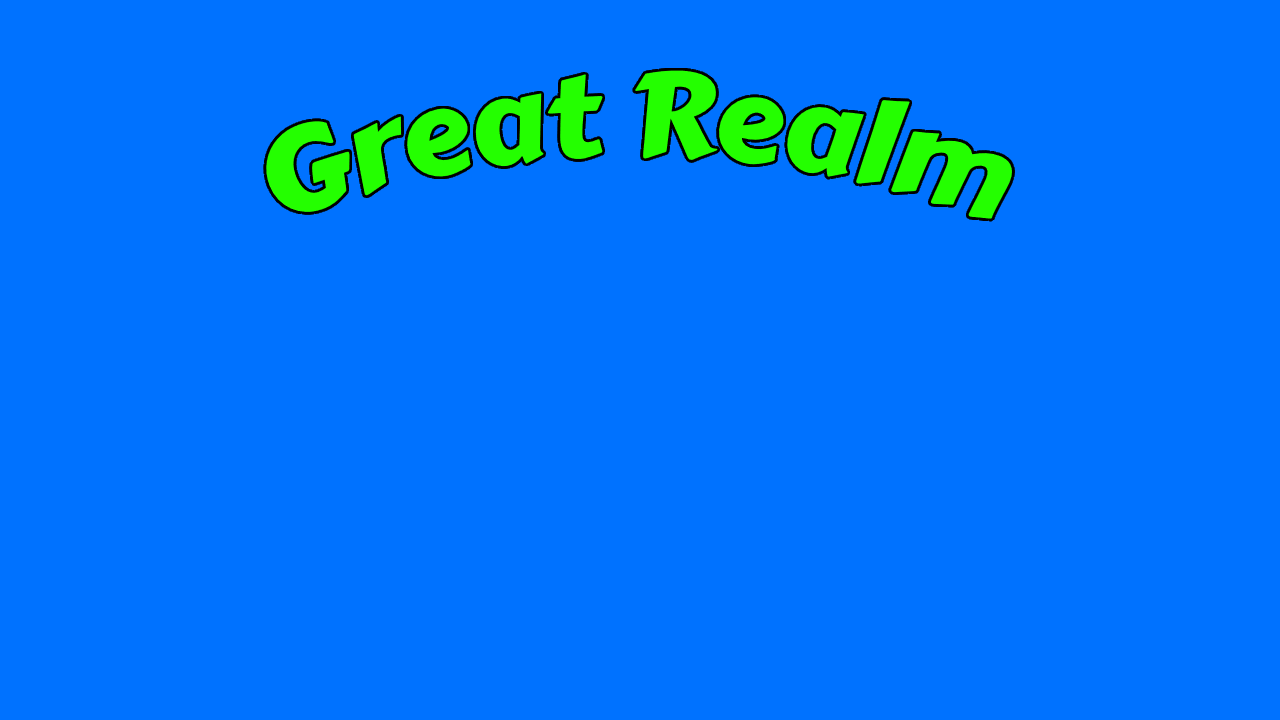
<style>
.page{position:relative;width:1280px;height:720px;background:#0072ff}
.page>*{position:absolute;margin:0}
.t1{font:118px "CarterOne";color:#24ff00}
</style>
<div class="page">
<p class="t1" style="left:266px;top:70px;width:747px;height:149px">Great Realm</p>
</div>
